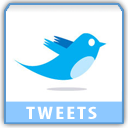
<style>
.page{position:relative;width:128px;height:128px;background:#ffffff}
.page>*{position:absolute;margin:0}
.t1{font:18px "MyriadPro-BoldCond";letter-spacing:0.075em;color:#ffffff;scale:1.3 1}
</style>
<div class="page">
<p class="t1" style="left:26px;top:106px;width:71px;height:13px">TWEETS</p>
</div>
